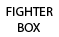
<style>
.page{position:relative;width:59px;height:37px;background:#ffffff}
.page>*{position:absolute;margin:0}
.t1{font:13.4px "MyriadPro-Regular";color:#000000}
</style>
<div class="page">
<p class="t1" style="left:6px;top:7px;width:47px;height:25px">FIGHTER<br>    BOX</p>
</div>
